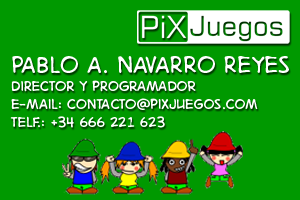
<style>
.page{position:relative;width:300px;height:200px;background:#009900}
.page>*{position:absolute;margin:0}
.t1{font:18px/18px "DigitalStrip.BB";color:#ffffff}
.t2{font:30px "DigitalStrip.BB";color:#ffffff}
</style>
<div class="page">
<p class="t1" style="left:10px;top:56px;width:279px;height:72px"><span class="t2">Pablo a. Navarro Reyes<br></span>director y programador<br>e-mail: contacto@pixjuegos.com<br>Telf.: +34 666 221 623</p>
</div>
